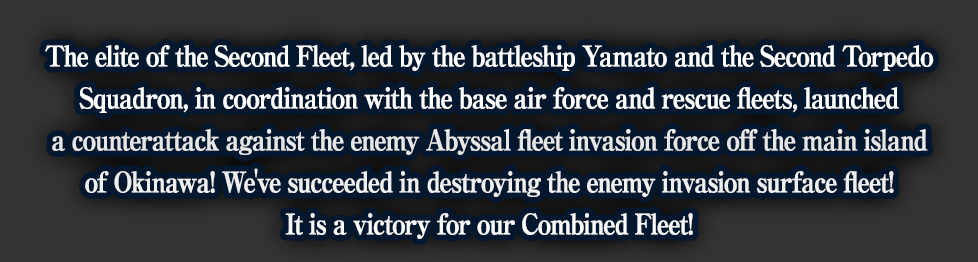
<style>
.page{position:relative;width:978px;height:262px;background:#03172f}
.page>*{position:absolute;margin:0}
.t1{font:28px/42px "RyuminPro-ExBold";letter-spacing:-0.08em;color:#ffffff;font-weight:bold;scale:0.9 1}
</style>
<div class="page">
<p class="t1" style="left:45px;top:45px;width:889px;height:194px;text-align:center">The elite of the Second Fleet, led by the battleship Yamato and the Second Torpedo<br>Squadron, in coordination with the base air force and rescue fleets, launched<br>a counterattack against the enemy Abyssal fleet invasion force off the main island<br>of Okinawa! We've succeeded in destroying the enemy invasion surface fleet!<br>It is a victory for our Combined Fleet!</p>
</div>
